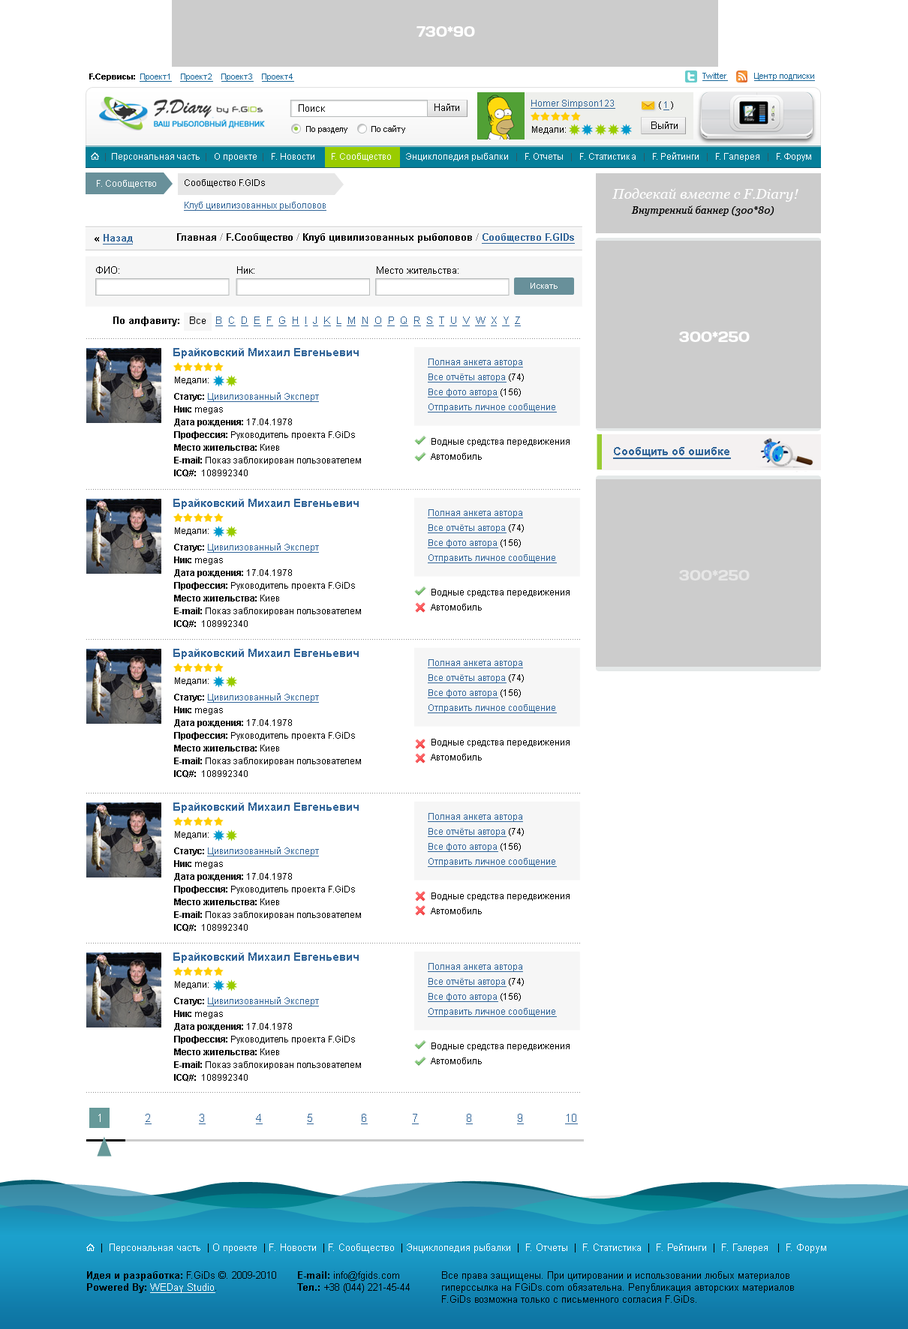
<style>
.page{position:relative;width:908px;height:1329px;background:#ffffff}
.page>*{position:absolute;margin:0}
.t1{font:14.2px "Days";color:#ffffff}
.t2{font:8.2px "ArialMT";color:#1c699a;text-decoration:underline}
.t3{font:8.2px "Arial-BoldMT";color:#000000}
.t4{font:9px "ArialMT";color:#336699;text-decoration:underline}
.t5{font:9px "ArialMT";color:#000000}
.t6{font:9.7px "ArialMT";color:#000000}
.t7{font:9.8px "ArialMT";color:#000000}
.t8{font:8.2px "ArialMT";color:#000000}
.t9{font:9px "ArialMT";color:#ffffff}
.t10{font:9px "ArialMT";color:#2d5a63}
.t11{font:9px/22.5px "ArialMT";color:#336699;text-decoration:underline}
.t12{font:9px/22.5px "ArialMT";color:#000000}
.t13{font:14.2px "Georgia-Italic";color:#fefefe}
.t14{font:10.1px/14.8px "Georgia-Italic";color:#000000}
.t15{font:9.8px "Arial-BoldMT";color:#000000}
.t16{font:9.8px "Arial-BoldMT";color:#999999}
.t17{font:9.8px "Arial-BoldMT";color:#336699;text-decoration:underline}
.t18{font:8.2px "ArialMT";color:#ffffff}
.t19{font:9.8px "ArialMT";color:#336699;text-decoration:underline}
.t20{font:11.2px "Arial-BoldMT";color:#336699}
.t21{font:9px/15px "ArialMT";color:#336699;text-decoration:underline}
.t22{font:9px/15px "ArialMT";color:#000000}
.t23{font:9px/12.8px "ArialMT";color:#000000}
.t24{font:9px/12.8px "Arial-BoldMT";color:#000000}
.t25{font:9px/12.8px "ArialMT";color:#336699;text-decoration:underline}
.t26{font:11.2px "Arial-BoldMT";color:#336699;text-decoration:underline}
.t27{font:14.2px "Days";color:#e6e6e6}
.t28{font:11.2px "ArialMT";color:#336699;text-decoration:underline}
.t29{font:11.2px "ArialMT";color:#ffffff}
.t30{font:9.8px "ArialMT";color:#ffffff}
.t31{font:9.8px "ArialMT";color:#ffffff;text-decoration:underline}
</style>
<div class="page">
<p class="t1" style="left:416px;top:26px;width:59px;height:11px">730*90</p>
<p class="t2" style="left:89px;top:74px;width:205px;height:8px"><span class="t3">F.Сервисы:  </span>Проект1    Проект2    Проект3    Проект4</p>
<p class="t2" style="left:702px;top:73px;width:26px;height:8px">Twitter</p>
<p class="t2" style="left:754px;top:73px;width:60px;height:8px">Центр подписки</p>
<p class="t4" style="left:530px;top:100px;width:85px;height:9px">Homer Simpson123</p>
<p class="t5" style="left:658px;top:101px;width:15px;height:9px">( <span class="t4">1</span> )</p>
<p class="t6" style="left:298px;top:104px;width:27px;height:8px">Поиск</p>
<p class="t7" style="left:434px;top:104px;width:25px;height:7px">Найти</p>
<p class="t8" style="left:306px;top:126px;width:41px;height:8px">По разделу</p>
<p class="t8" style="left:371px;top:125px;width:34px;height:9px">По сайту</p>
<p class="t5" style="left:532px;top:126px;width:34px;height:8px">Медали:</p>
<p class="t7" style="left:651px;top:122px;width:26px;height:7px">Выйти</p>
<p class="t9" style="left:105px;top:152px;width:706px;height:9px"><span class="t10">|</span>  Персональная часть  <span class="t10">| </span>  О проекте  <span class="t10">|</span>   F. Новости       F. Сообщество      Энциклопедия рыбалки  <span class="t10"> |</span>   F. Отчеты   <span class="t10">|</span>   F. Статистика   <span class="t10">|</span>   F. Рейтинги   <span class="t10">| </span>  F. Галерея   <span class="t10">|</span>   F. Форум</p>
<p class="t9" style="left:97px;top:180px;width:59px;height:8px">F. Сообщество</p>
<p class="t11" style="left:184px;top:179px;width:142px;height:32px"><span class="t12">Сообщество F.GIDs<br></span>Клуб цивилизованных рыболовов</p>
<p class="t13" style="left:612px;top:188px;width:186px;height:28px;text-align:center">Подсекай вместе с F.Diary!<br><span class="t14">Внутренний баннер (300*80)</span></p>
<p class="t15" style="left:177px;top:233px;width:397px;height:11px">Главная <span class="t16">/ </span>F.Сообщество <span class="t16">/ </span>Клуб цивилизованных рыболовов <span class="t16">/ </span><span class="t17">Сообщество F.GIDs</span></p>
<p class="t17" style="left:94px;top:234px;width:39px;height:10px"><span class="t15"> « </span>Назад</p>
<p class="t7" style="left:96px;top:266px;width:23px;height:8px">ФИО:</p>
<p class="t7" style="left:237px;top:266px;width:17px;height:8px">Ник:</p>
<p class="t7" style="left:376px;top:266px;width:82px;height:8px">Место жительства:</p>
<p class="t18" style="left:530px;top:283px;width:27px;height:6px">Искать</p>
<p class="t19" style="left:113px;top:316px;width:407px;height:10px"><span class="t15">По алфавиту:   </span><span class="t7">Все   </span>B  C  D  E  F  G  H  I  J  K  L  M  N  O  P  Q  R  S  T  U  V  W  X  Y  Z</p>
<p class="t1" style="left:679px;top:332px;width:70px;height:10px">300*250</p>
<p class="t20" style="left:173px;top:348px;width:185px;height:10px">Брайковский Михаил Евгеньевич</p>
<p class="t21" style="left:428px;top:358px;width:128px;height:54px">Полная анкета автора<br>Все отчёты автора<span class="t22"> (74)<br></span>Все фото автора<span class="t22"> (156)<br></span>Отправить личное сообщение</p>
<p class="t5" style="left:175px;top:376px;width:33px;height:9px">Медали:</p>
<p class="t23" style="left:174px;top:392px;width:187px;height:85px"><span class="t24">Статус: </span><span class="t25">Цивилизованный Эксперт<br></span><span class="t24">Ник:</span> megas<br><span class="t24">Дата рождения: </span>17.04.1978<br><span class="t24">Профессия:</span>  Руководитель проекта F.GiDs<br><span class="t24">Место жительства: </span>Киев<br><span class="t24">E-mail:</span> Показ заблокирован пользователем<br><span class="t24">ICQ#:</span> 108992340</p>
<p class="t22" style="left:430px;top:438px;width:139px;height:22px">Водные средства передвижения<br>Автомобиль</p>
<p class="t26" style="left:613px;top:447px;width:117px;height:12px">Сообщить об ошибке</p>
<p class="t20" style="left:173px;top:499px;width:185px;height:10px">Брайковский Михаил Евгеньевич</p>
<p class="t21" style="left:428px;top:509px;width:128px;height:54px">Полная анкета автора<br>Все отчёты автора<span class="t22"> (74)<br></span>Все фото автора<span class="t22"> (156)<br></span>Отправить личное сообщение</p>
<p class="t5" style="left:175px;top:527px;width:33px;height:9px">Медали:</p>
<p class="t23" style="left:174px;top:543px;width:187px;height:85px"><span class="t24">Статус: </span><span class="t25">Цивилизованный Эксперт<br></span><span class="t24">Ник:</span> megas<br><span class="t24">Дата рождения: </span>17.04.1978<br><span class="t24">Профессия:</span>  Руководитель проекта F.GiDs<br><span class="t24">Место жительства: </span>Киев<br><span class="t24">E-mail:</span> Показ заблокирован пользователем<br><span class="t24">ICQ#:</span> 108992340</p>
<p class="t27" style="left:679px;top:570px;width:70px;height:10px">300*250</p>
<p class="t22" style="left:430px;top:589px;width:139px;height:21px">Водные средства передвижения<br>Автомобиль</p>
<p class="t20" style="left:173px;top:649px;width:185px;height:10px">Брайковский Михаил Евгеньевич</p>
<p class="t21" style="left:428px;top:659px;width:128px;height:54px">Полная анкета автора<br>Все отчёты автора<span class="t22"> (74)<br></span>Все фото автора<span class="t22"> (156)<br></span>Отправить личное сообщение</p>
<p class="t5" style="left:175px;top:677px;width:33px;height:9px">Медали:</p>
<p class="t23" style="left:174px;top:693px;width:187px;height:85px"><span class="t24">Статус: </span><span class="t25">Цивилизованный Эксперт<br></span><span class="t24">Ник:</span> megas<br><span class="t24">Дата рождения: </span>17.04.1978<br><span class="t24">Профессия:</span>  Руководитель проекта F.GiDs<br><span class="t24">Место жительства: </span>Киев<br><span class="t24">E-mail:</span> Показ заблокирован пользователем<br><span class="t24">ICQ#:</span> 108992340</p>
<p class="t22" style="left:430px;top:739px;width:139px;height:21px">Водные средства передвижения<br>Автомобиль</p>
<p class="t20" style="left:173px;top:802px;width:185px;height:11px">Брайковский Михаил Евгеньевич</p>
<p class="t21" style="left:428px;top:813px;width:128px;height:54px">Полная анкета автора<br>Все отчёты автора<span class="t22"> (74)<br></span>Все фото автора<span class="t22"> (156)<br></span>Отправить личное сообщение</p>
<p class="t5" style="left:175px;top:831px;width:33px;height:8px">Медали:</p>
<p class="t23" style="left:174px;top:847px;width:187px;height:85px"><span class="t24">Статус: </span><span class="t25">Цивилизованный Эксперт<br></span><span class="t24">Ник:</span> megas<br><span class="t24">Дата рождения: </span>17.04.1978<br><span class="t24">Профессия:</span>  Руководитель проекта F.GiDs<br><span class="t24">Место жительства: </span>Киев<br><span class="t24">E-mail:</span> Показ заблокирован пользователем<br><span class="t24">ICQ#:</span> 108992340</p>
<p class="t22" style="left:430px;top:892px;width:139px;height:22px">Водные средства передвижения<br>Автомобиль</p>
<p class="t20" style="left:173px;top:952px;width:185px;height:11px">Брайковский Михаил Евгеньевич</p>
<p class="t21" style="left:428px;top:963px;width:128px;height:54px">Полная анкета автора<br>Все отчёты автора<span class="t22"> (74)<br></span>Все фото автора<span class="t22"> (156)<br></span>Отправить личное сообщение</p>
<p class="t5" style="left:175px;top:981px;width:33px;height:8px">Медали:</p>
<p class="t23" style="left:174px;top:997px;width:187px;height:85px"><span class="t24">Статус: </span><span class="t25">Цивилизованный Эксперт<br></span><span class="t24">Ник:</span> megas<br><span class="t24">Дата рождения: </span>17.04.1978<br><span class="t24">Профессия:</span>  Руководитель проекта F.GiDs<br><span class="t24">Место жительства: </span>Киев<br><span class="t24">E-mail:</span> Показ заблокирован пользователем<br><span class="t24">ICQ#:</span> 108992340</p>
<p class="t22" style="left:430px;top:1042px;width:139px;height:22px">Водные средства передвижения<br>Автомобиль</p>
<p class="t28" style="left:98px;top:1114px;width:480px;height:10px"><span class="t29">1              </span>2                3                 4               5                6               7                8               9              10</p>
<p class="t30" style="left:101px;top:1244px;width:725px;height:9px"><span class="t7">|</span>  Персональная часть <span class="t7"> |</span> О проекте  <span class="t7">|</span> F. Новости  <span class="t7">|</span> F. Сообщество  <span class="t7">|</span> Энциклопедия рыбалки  <span class="t7">|</span>  F. Отчеты  <span class="t7">|</span>  F. Статистика  <span class="t7">|</span>  F. Рейтинги  <span class="t7">|</span>  F. Галерея   <span class="t7">|</span>  F. Форум</p>
<p class="t7" style="left:87px;top:1271px;width:189px;height:22px"><span class="t15">Идея и разработка:</span> F.GiDs ©. 2009-2010<br><span class="t15">Powered By: </span><span class="t31">WEDay Studio</span>.</p>
<p class="t7" style="left:297px;top:1271px;width:113px;height:22px"><span class="t15">E-mail: </span>info@fgids.com<br><span class="t15">Тел.:</span> +38 (044) 221-45-44</p>
<p class="t7" style="left:442px;top:1271px;width:352px;height:32px">Все права защищены. При цитировании и использовании любых материалов гиперссылка на FGiDs.com обязательна. Републикация авторских материалов F.GiDs возможна только с письменного согласия F.GiDs.</p>
</div>
